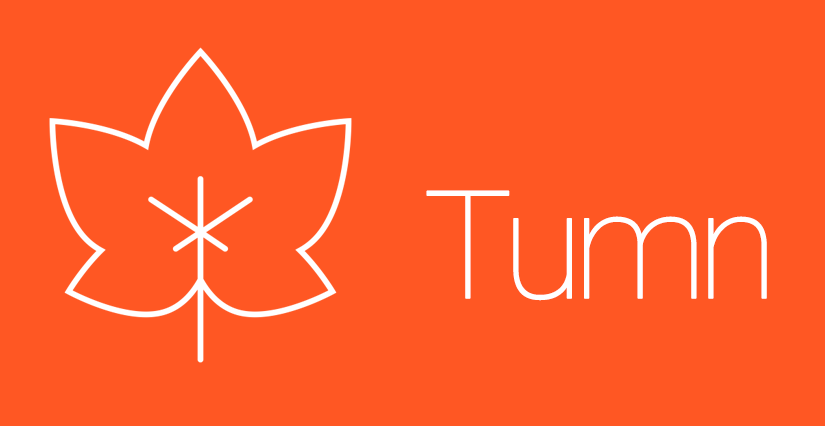
<style>
.page{position:relative;width:825px;height:426px;background:#ff5723}
.page>*{position:absolute;margin:0}
.t1{font:150px "Roboto-Thin";letter-spacing:-0.1em;color:#ffffff;font-weight:bold}
</style>
<div class="page">
<p class="t1" style="left:426px;top:190px;width:341px;height:111px">Tumn</p>
</div>
